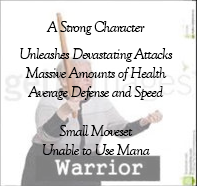
<style>
.page{position:relative;width:197px;height:186px;background:#ffffff}
.page>*{position:absolute;margin:0}
.t1{font:16px "GoudyOldStyleT-Italic";letter-spacing:-0.05em;color:#010101}
</style>
<div class="page">
<p class="t1" style="left:20px;top:21px;width:153px;height:134px;text-align:center">A Strong Character<br><br>Unleashes Devastating Attacks<br>Massive Amounts of Health<br>Average Defense and Speed<br><br>Small Moveset<br>Unable to Use Mana</p>
</div>
